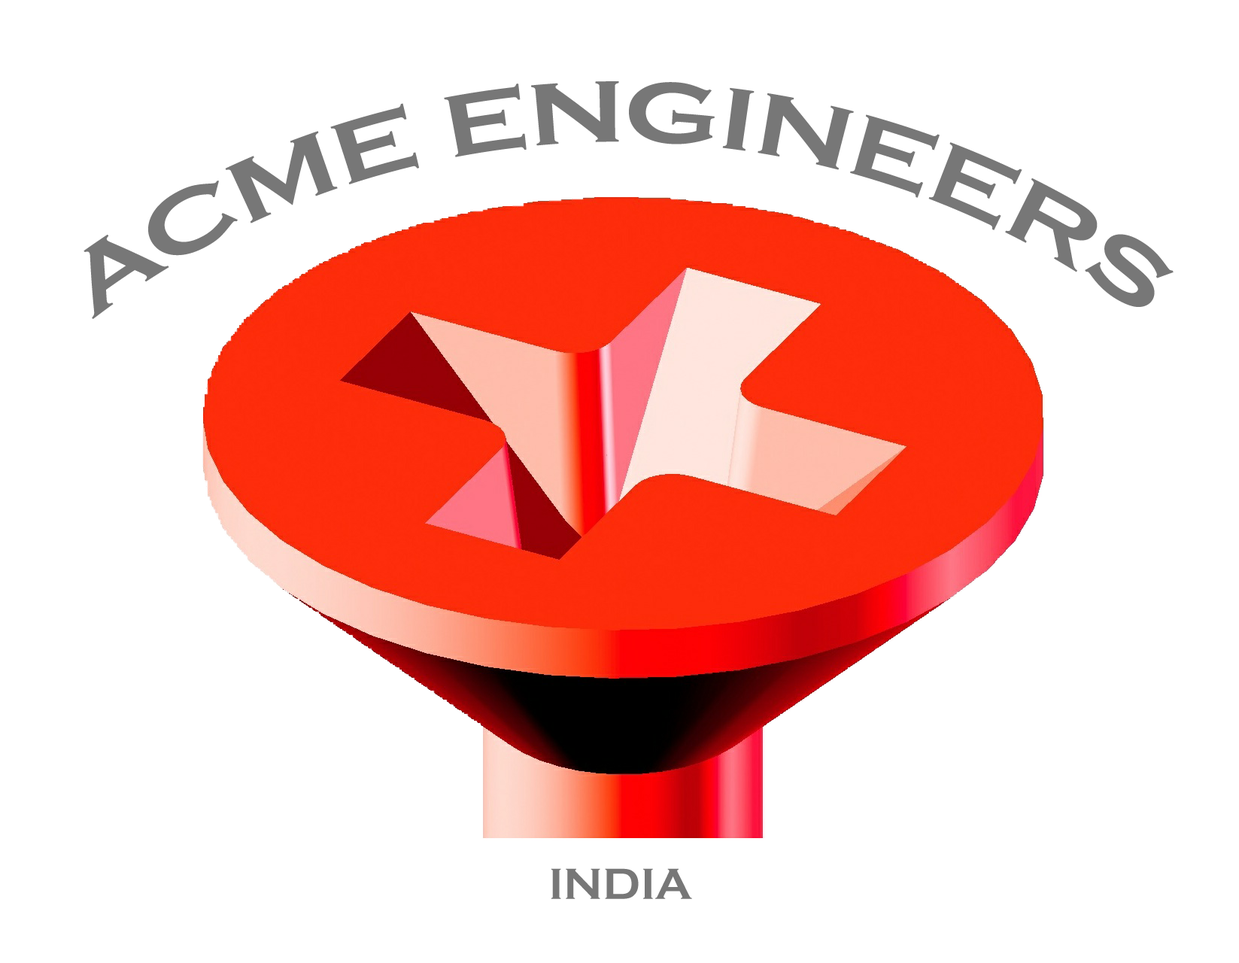
<style>
.page{position:relative;width:1239px;height:963px;background:#ffffff}
.page>*{position:absolute;margin:0}
.t1{font:90.2px "CopperplateGothic-Bold";color:#777777}
.t2{font:45.1px "CopperplateGothic-Bold";color:#777777}
</style>
<div class="page">
<p class="t1" style="left:83px;top:81px;width:1090px;height:238px;text-align:center">ACME ENGINEERS</p>
<p class="t2" style="left:551px;top:868px;width:141px;height:31px">INDIA</p>
</div>
